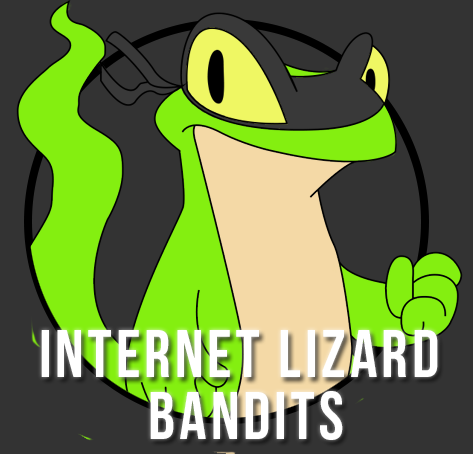
<style>
.page{position:relative;width:473px;height:454px;background:#333333}
.page>*{position:absolute;margin:0}
.t1{font:66.7px/62.5px "BebasNeue";letter-spacing:0.06em;color:#ffffff}
</style>
<div class="page">
<p class="t1" style="left:41px;top:330px;width:397px;height:110px;text-align:center">Internet lizard <br>bandits</p>
</div>
